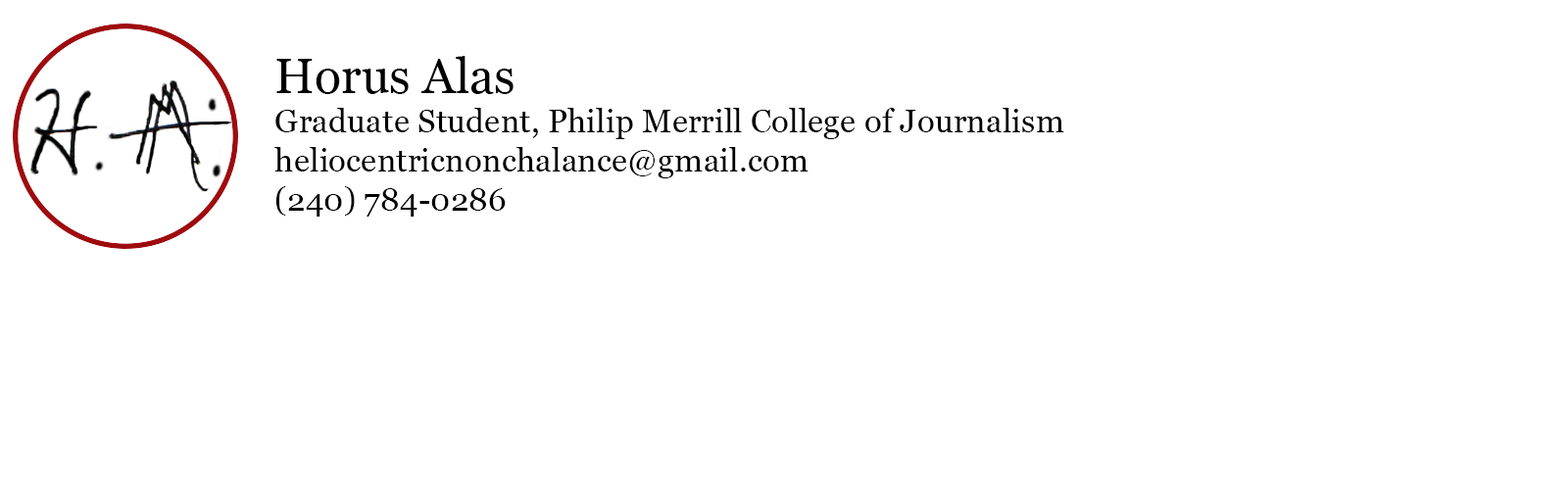
<style>
.page{position:relative;width:1568px;height:490px;background:#ffffff}
.page>*{position:absolute;margin:0}
.t1{font:32.7px "Georgia";color:#000000}
.t2{font:11.8px "Georgia";color:#000000}
</style>
<div class="page">
<p class="t1" style="left:274px;top:56px;width:790px;height:161px"><span class="t2">Horus Alas<br></span>Graduate Student, Philip Merrill College of Journalism<br>heliocentricnonchalance@gmail.com<br>(240) 784-0286</p>
</div>
